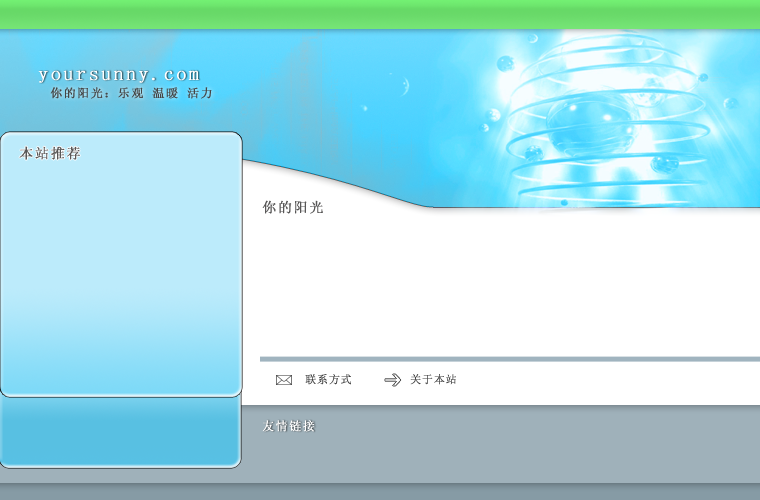
<style>
.page{position:relative;width:760px;height:500px;background:#ffffff}
.page>*{position:absolute;margin:0}
.t1{font:20px "SimSun";letter-spacing:0.1em;color:#ffffff;font-weight:bold}
.t2{font:12px "SimSun";letter-spacing:0.1em;color:#454545;font-weight:bold}
.t3{font:14px "SimSun";letter-spacing:0.1em;color:#585757;font-weight:bold}
.t4{font:11px "SimSun";letter-spacing:0.05em;color:#414141;font-weight:bold}
.t5{font:12px "SimSun";letter-spacing:0.1em;color:#ffffff;font-weight:bold}
</style>
<div class="page">
<p class="t1" style="left:38px;top:70px;width:161px;height:13px">yoursunny.com</p>
<p class="t2" style="left:50px;top:87px;width:162px;height:12px">你的阳光：乐观 温暖 活力</p>
<p class="t3" style="left:19px;top:146px;width:61px;height:14px">本站推荐</p>
<p class="t3" style="left:262px;top:200px;width:61px;height:14px">你的阳光</p>
<p class="t4" style="left:305px;top:374px;width:46px;height:11px">联系方式</p>
<p class="t4" style="left:410px;top:374px;width:46px;height:11px">关于本站</p>
<p class="t5" style="left:262px;top:420px;width:53px;height:12px">友情链接</p>
</div>
